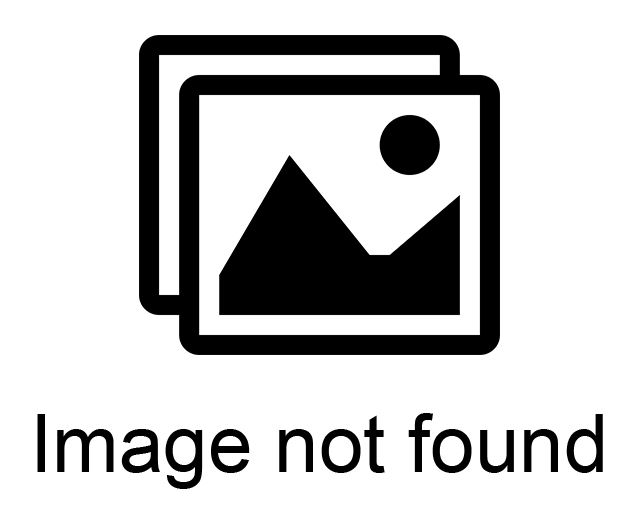
<style>
.page{position:relative;width:638px;height:512px;background:#ffffff}
.page>*{position:absolute;margin:0}
.t1{font:80px "ArialMT";color:#000000}
</style>
<div class="page">
<p class="t1" style="left:37px;top:413px;width:566px;height:76px">Image not found</p>
</div>
